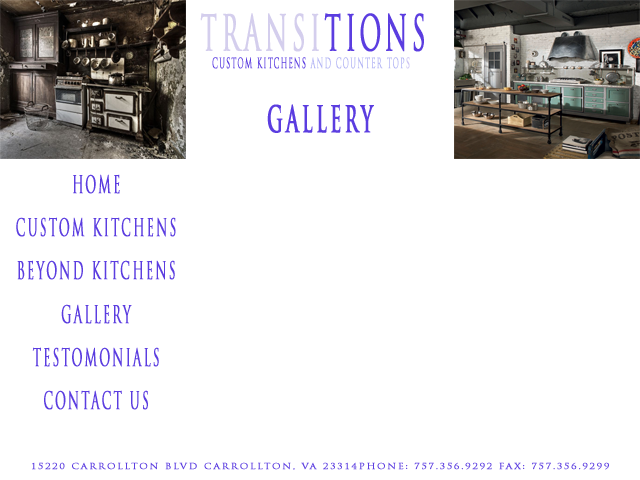
<style>
.page{position:relative;width:640px;height:480px;background:#ffffff}
.page>*{position:absolute;margin:0}
.t1{font:48px "TrajanPro-Regular";letter-spacing:0.15em;color:#d4ceed;text-transform:uppercase;font-weight:bold;scale:0.5 1}
.t2{font:48px "TrajanPro-Regular";letter-spacing:0.15em;color:#5b3de0;text-transform:uppercase;font-weight:bold;scale:0.5 1}
.t3{font:14px "TrajanPro-Regular";letter-spacing:0.15em;color:#5b3de0;text-transform:uppercase;font-weight:bold;scale:0.5 1}
.t4{font:14px "TrajanPro-Regular";letter-spacing:0.15em;color:#b2b4f4;text-transform:uppercase;font-weight:bold;scale:0.5 1}
.t5{font:14px "TrajanPro-Regular";letter-spacing:0.15em;color:#ccc3f2;text-transform:uppercase;font-weight:bold;scale:0.5 1}
.t6{font:36px "TrajanPro-Bold";letter-spacing:0.15em;color:#5b3de0;text-transform:uppercase;font-weight:bold;scale:0.5 1}
.t7{font:24px "TrajanPro-Regular";letter-spacing:0.15em;color:#5b3de0;text-transform:uppercase;font-weight:bold;scale:0.5 1}
.t8{font:8px "TrajanPro-Regular";letter-spacing:0.15em;color:#5b3de0;text-transform:uppercase;font-weight:bold;scale:1.19 1}
</style>
<div class="page">
<p class="t1" style="left:200px;top:13px;width:224px;height:39px">Transi<span class="t2">tions</span></p>
<p class="t3" style="left:212px;top:57px;width:198px;height:12px">Custom Kitchens <span class="t4">and Counter Top</span><span class="t5">s</span></p>
<p class="t6" style="left:267px;top:104px;width:107px;height:29px">GAllery</p>
<p class="t7" style="left:16px;top:174px;width:160px;height:236px;text-align:center">HOme<br><br>Custom Kitchens<br><br>Beyond Kitchens<br><br>Gallery<br><br>Testomonials<br><br>Contact Us</p>
<p class="t8" style="left:32px;top:462px;width:577px;height:8px">15220 Carrollton Blvd Carrollton, VA 23314Phone: 757.356.9292 Fax: 757.356.9299</p>
</div>
